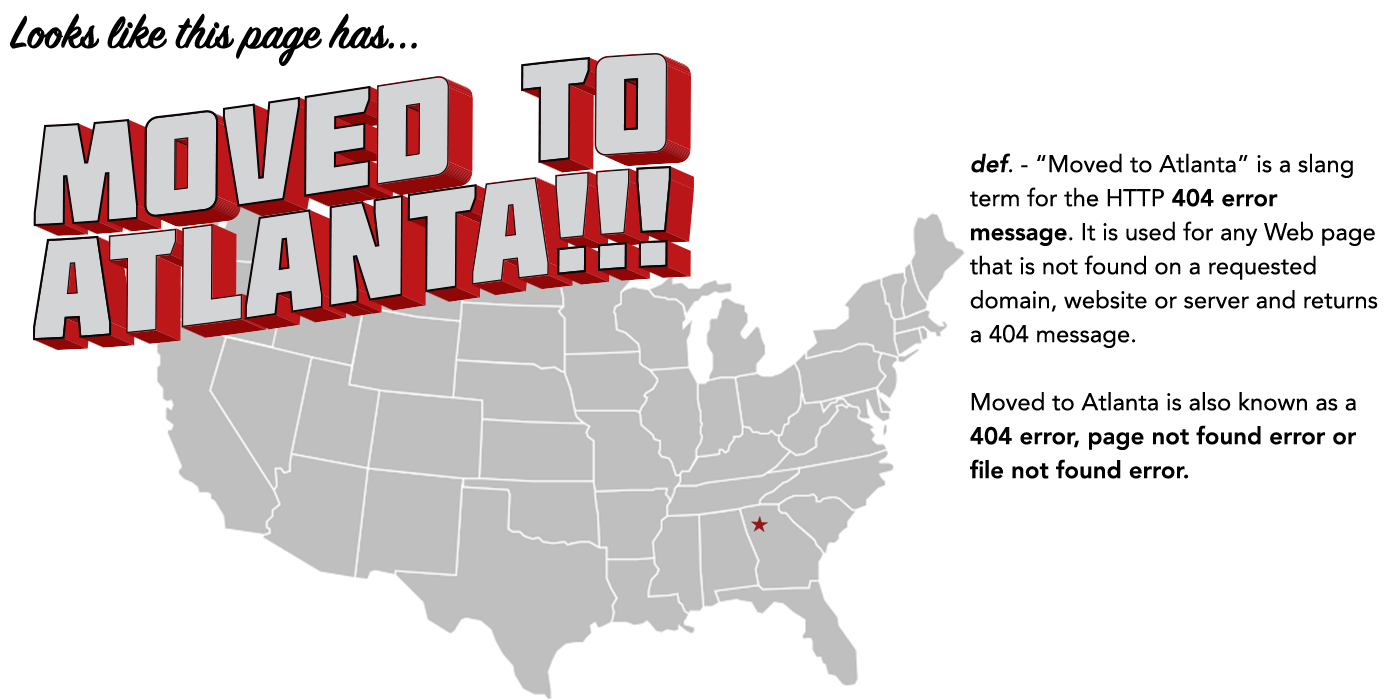
<style>
.page{position:relative;width:1400px;height:700px;background:#ffffff}
.page>*{position:absolute;margin:0}
.t1{font:51px "SignPainter-HouseScriptSemibold";color:#000000}
.t2{font:24px/34px "Avenir-Roman";color:#000000}
.t3{font:24px/34px "Avenir-HeavyOblique";color:#000000}
.t4{font:24px/34px "Avenir-Oblique";color:#000000}
.t5{font:24px/34px "Avenir-Heavy";color:#000000}
</style>
<div class="page">
<p class="t1" style="left:10px;top:13px;width:407px;height:53px">Looks like this page has...</p>
<p class="t2" style="left:970px;top:153px;width:408px;height:326px"><span class="t3">def</span><span class="t4">.</span> - “Moved to Atlanta” is a slang term for the HTTP <span class="t5">404 error message</span>. It is used for any Web page that is not found on a requested domain, website or server and returns a 404 message.<br><br>Moved to Atlanta is also known as a <span class="t5">404 error, page not found error or file not found error.</span></p>
</div>
